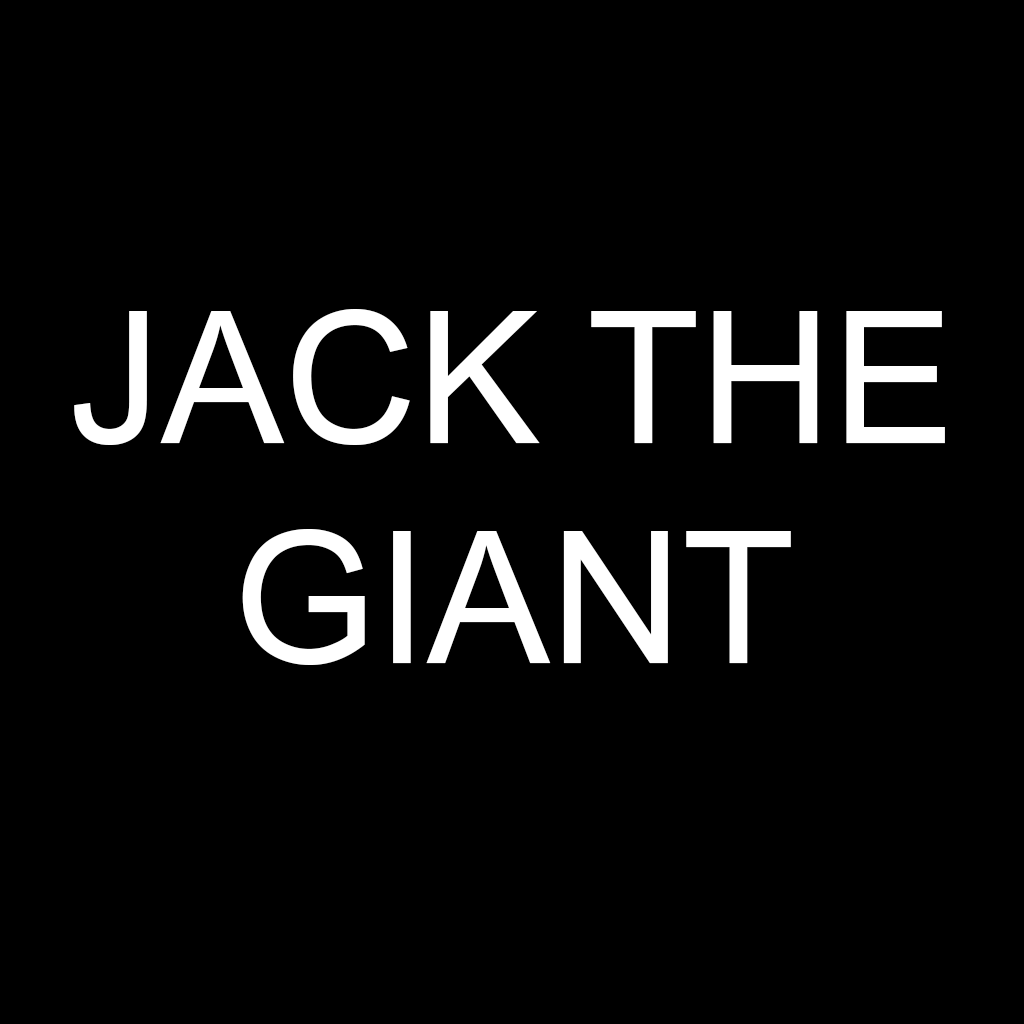
<style>
.page{position:relative;width:1024px;height:1024px;background:#000000}
.page>*{position:absolute;margin:0}
.t1{font:184px "ArialMT";color:#ffffff}
</style>
<div class="page">
<p class="t1" style="left:74px;top:309px;width:871px;height:356px;text-align:center">JACK THE GIANT</p>
</div>
